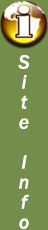
<style>
.page{position:relative;width:48px;height:230px;background:#748d4b}
.page>*{position:absolute;margin:0}
.t1{font:20px "FranklinGothic-MediumItalic";color:#ffffff}
</style>
<div class="page">
<p class="t1" style="left:18px;top:55px;width:12px;height:174px">Site Info</p>
</div>
